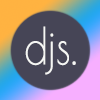
<style>
.page{position:relative;width:100px;height:100px;background:#464556}
.page>*{position:absolute;margin:0}
.t1{font:50px "PoiretOne-Regular";color:#f5f6f4;font-weight:bold;scale:0.8 1}
</style>
<div class="page">
<p class="t1" style="left:25px;top:26px;width:51px;height:49px">djs.</p>
</div>
